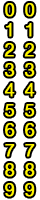
<style>
.page{position:relative;width:40px;height:200px;background:#ffffff}
.page>*{position:absolute;margin:0}
.t1{font:18px "HelveticaNeue";color:#fff600;font-weight:bold}
</style>
<div class="page">
<p class="t1" style="left:5px;top:3px;width:10px;height:14px">0</p>
<p class="t1" style="left:25px;top:3px;width:10px;height:14px">0</p>
<p class="t1" style="left:6px;top:23px;width:6px;height:14px">1</p>
<p class="t1" style="left:26px;top:23px;width:6px;height:14px">1</p>
<p class="t1" style="left:4px;top:43px;width:10px;height:14px">2</p>
<p class="t1" style="left:24px;top:43px;width:10px;height:14px">2</p>
<p class="t1" style="left:4px;top:63px;width:11px;height:14px">3</p>
<p class="t1" style="left:24px;top:63px;width:11px;height:14px">3</p>
<p class="t1" style="left:4px;top:83px;width:11px;height:14px">4</p>
<p class="t1" style="left:24px;top:83px;width:11px;height:14px">4</p>
<p class="t1" style="left:5px;top:104px;width:10px;height:13px">5</p>
<p class="t1" style="left:25px;top:104px;width:10px;height:13px">5</p>
<p class="t1" style="left:5px;top:123px;width:10px;height:14px">6</p>
<p class="t1" style="left:25px;top:123px;width:10px;height:14px">6</p>
<p class="t1" style="left:5px;top:144px;width:10px;height:13px">7</p>
<p class="t1" style="left:25px;top:144px;width:10px;height:13px">7</p>
<p class="t1" style="left:5px;top:163px;width:10px;height:14px">8</p>
<p class="t1" style="left:25px;top:163px;width:10px;height:14px">8</p>
<p class="t1" style="left:5px;top:183px;width:10px;height:14px">9</p>
<p class="t1" style="left:25px;top:183px;width:10px;height:14px">9</p>
</div>
